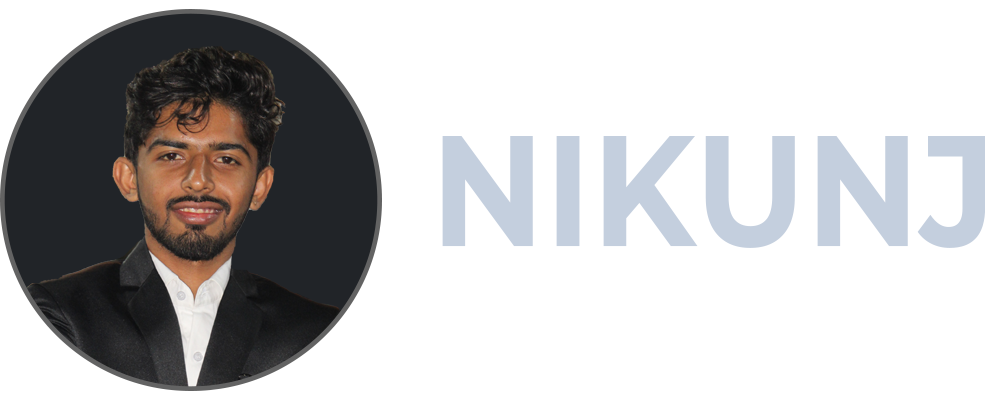
<style>
.page{position:relative;width:985px;height:400px;background:#ffffff}
.page>*{position:absolute;margin:0}
.t1{font:157.1px "Montserrat-Bold";letter-spacing:0.005em;color:#c4cfde;text-transform:uppercase;scale:0.89 1}
</style>
<div class="page">
<p class="t1" style="left:442px;top:136px;width:544px;height:112px">nikunj</p>
</div>
